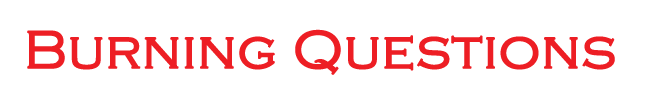
<style>
.page{position:relative;width:646px;height:100px;background:#ffffff}
.page>*{position:absolute;margin:0}
.t1{font:55px "CopperplateGothic-Light";color:#ed1e24;font-weight:bold}
</style>
<div class="page">
<p class="t1" style="left:27px;top:29px;width:588px;height:46px">Burning Questions</p>
</div>
